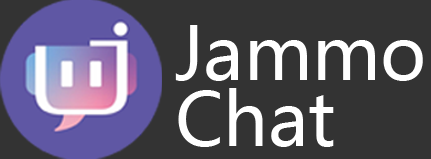
<style>
.page{position:relative;width:431px;height:159px;background:#333333}
.page>*{position:absolute;margin:0}
.t1{font:72.9px/66.7px "MicrosoftYaHei";color:#ffffff}
</style>
<div class="page">
<p class="t1" style="left:175px;top:25px;width:248px;height:122px">Jammo<br>Chat</p>
</div>
